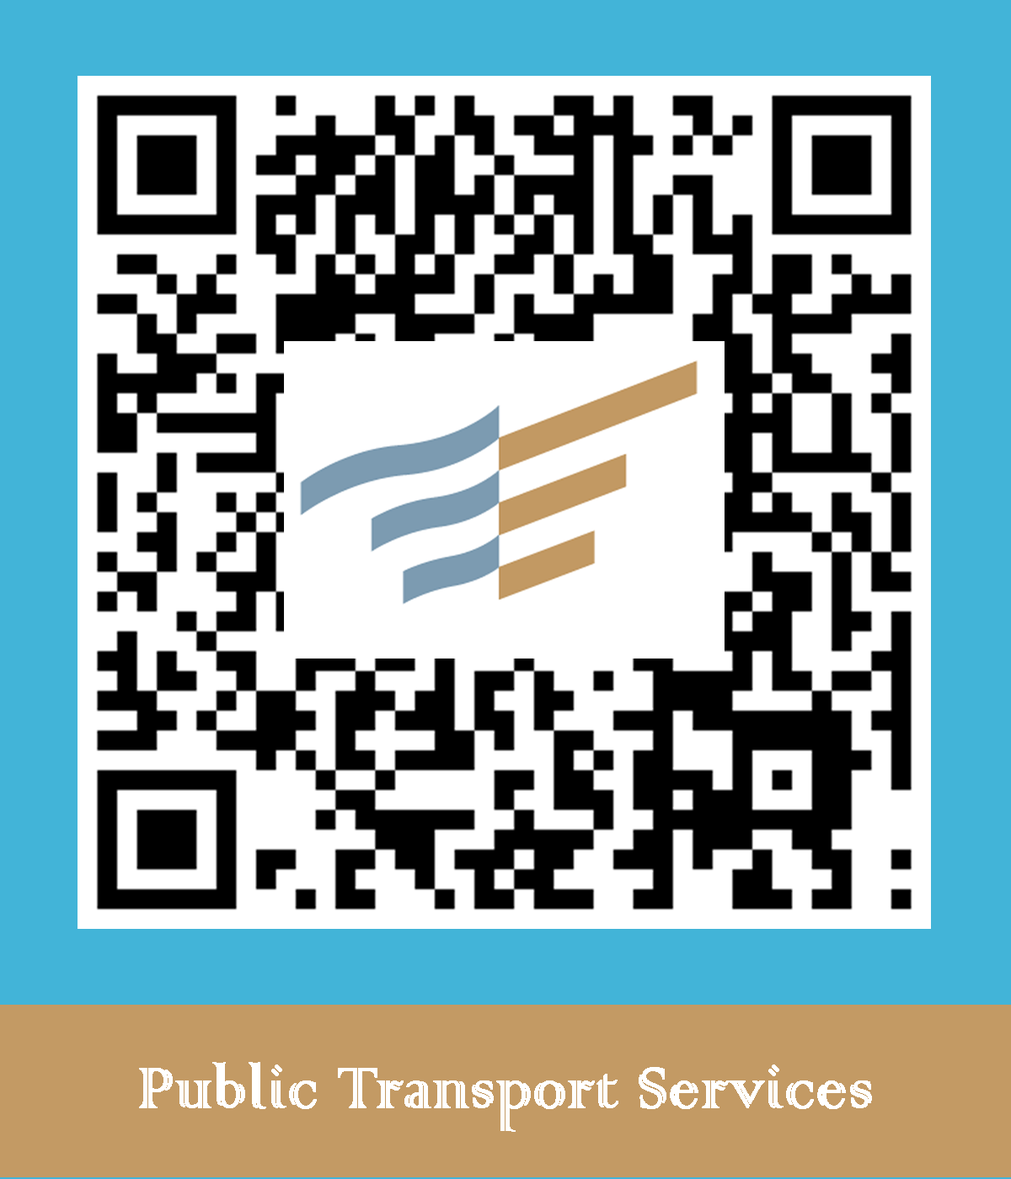
<style>
.page{position:relative;width:1011px;height:1179px;background:#ffffff}
.page>*{position:absolute;margin:0}
.t1{font:76.5px "ColonnaMT";color:#ffffff;font-weight:bold;scale:0.86 1}
</style>
<div class="page">
<p class="t1" style="left:139px;top:1062px;width:733px;height:70px">Public Transport Services</p>
</div>
